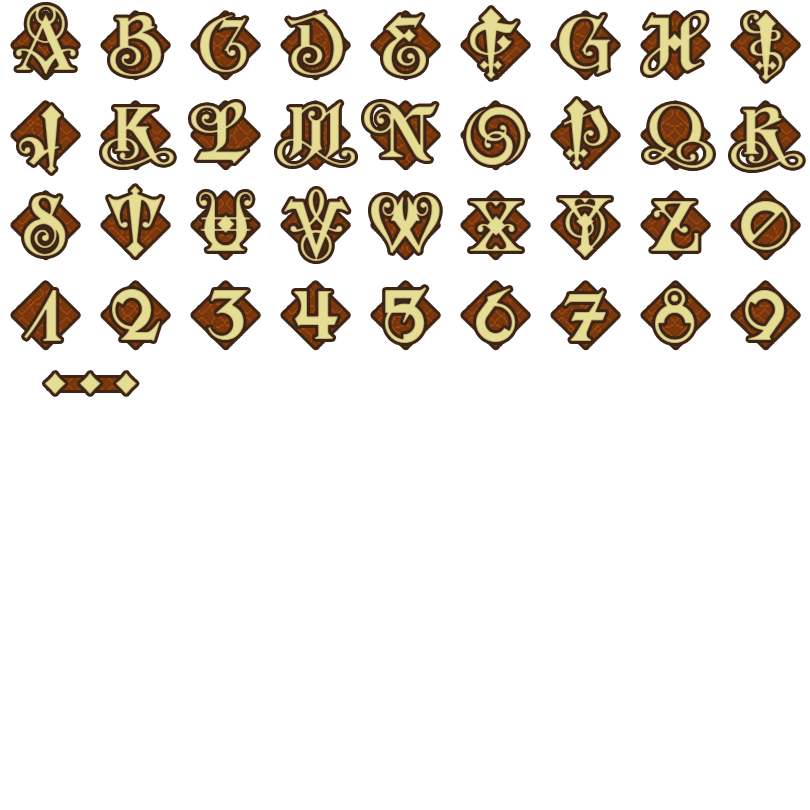
<style>
.page{position:relative;width:810px;height:810px;background:#ffffff}
.page>*{position:absolute;margin:0}
.t1{font:80px "SaberRegular";color:#e1d790}
.t2{font:80px "SaberRegular";color:#e6dd94}
.t3{font:80px "SaberRegular";color:#e5dc93}
.t4{font:80px "SaberRegular";color:#e4db93}
.t5{font:80px "SaberRegular";color:#e2d891}
.t6{font:80px "SaberRegular";color:#e3d991}
.t7{font:80px "SaberRegular";color:#e4da92}
.t8{font:120px "SaberRegular";color:#e6dd94}
.t9{font:120px "SaberRegular";color:#e5dc93}
.t10{font:146.7px "SaberRegular";color:#e6dd94}
</style>
<div class="page">
<p class="t1" style="left:16px;top:5px;width:60px;height:69px">A</p>
<p class="t2" style="left:110px;top:15px;width:52px;height:61px">B</p>
<p class="t3" style="left:200px;top:15px;width:47px;height:57px">C</p>
<p class="t3" style="left:287px;top:12px;width:56px;height:63px">D</p>
<p class="t4" style="left:383px;top:15px;width:43px;height:61px">E</p>
<p class="t2" style="left:470px;top:8px;width:48px;height:71px">F</p>
<p class="t2" style="left:559px;top:15px;width:52px;height:59px">G</p>
<p class="t2" style="left:643px;top:13px;width:64px;height:62px">H</p>
<p class="t3" style="left:743px;top:13px;width:40px;height:68px">I</p>
<p class="t2" style="left:191px;top:102px;width:57px;height:61px">L</p>
<p class="t2" style="left:277px;top:102px;width:78px;height:64px">M</p>
<p class="t3" style="left:364px;top:102px;width:73px;height:59px">N</p>
<p class="t2" style="left:564px;top:99px;width:44px;height:68px">P</p>
<p class="t2" style="left:19px;top:105px;width:43px;height:68px">J</p>
<p class="t2" style="left:102px;top:107px;width:72px;height:60px">K</p>
<p class="t3" style="left:466px;top:107px;width:60px;height:58px">O</p>
<p class="t5" style="left:644px;top:104px;width:69px;height:64px">Q</p>
<p class="t3" style="left:731px;top:107px;width:72px;height:63px">R</p>
<p class="t3" style="left:24px;top:195px;width:42px;height:61px">S</p>
<p class="t2" style="left:108px;top:186px;width:55px;height:71px">T</p>
<p class="t2" style="left:199px;top:192px;width:54px;height:59px">U</p>
<p class="t4" style="left:284px;top:189px;width:65px;height:72px">V</p>
<p class="t2" style="left:371px;top:195px;width:69px;height:58px">W</p>
<p class="t6" style="left:559px;top:198px;width:52px;height:59px">Y</p>
<p class="t7" style="left:470px;top:201px;width:52px;height:50px">X</p>
<p class="t2" style="left:651px;top:201px;width:48px;height:50px">Z</p>
<p class="t8" style="left:741px;top:201px;width:50px;height:49px">0</p>
<p class="t8" style="left:24px;top:290px;width:38px;height:51px">1</p>
<p class="t8" style="left:112px;top:289px;width:48px;height:52px">2</p>
<p class="t8" style="left:208px;top:290px;width:40px;height:50px">3</p>
<p class="t8" style="left:294px;top:291px;width:44px;height:48px">4</p>
<p class="t8" style="left:385px;top:287px;width:42px;height:56px">5</p>
<p class="t8" style="left:476px;top:288px;width:40px;height:54px">6</p>
<p class="t8" style="left:564px;top:290px;width:42px;height:51px">7</p>
<p class="t9" style="left:655px;top:288px;width:40px;height:55px">8</p>
<p class="t8" style="left:745px;top:290px;width:40px;height:50px">9</p>
<p class="t10" style="left:45px;top:373px;width:92px;height:21px">···</p>
</div>
